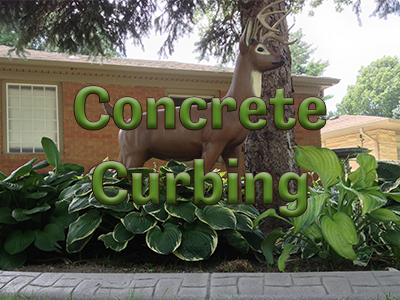
<style>
.page{position:relative;width:400px;height:300px}
.page>*{position:absolute;margin:0}
.t1{font:62.5px "Tenso-Bold"}
</style>
<div class="page">
<p class="t1" style="left:74px;top:86px;width:252px;height:131px;text-align:center">Concrete Curbing</p>
</div>
